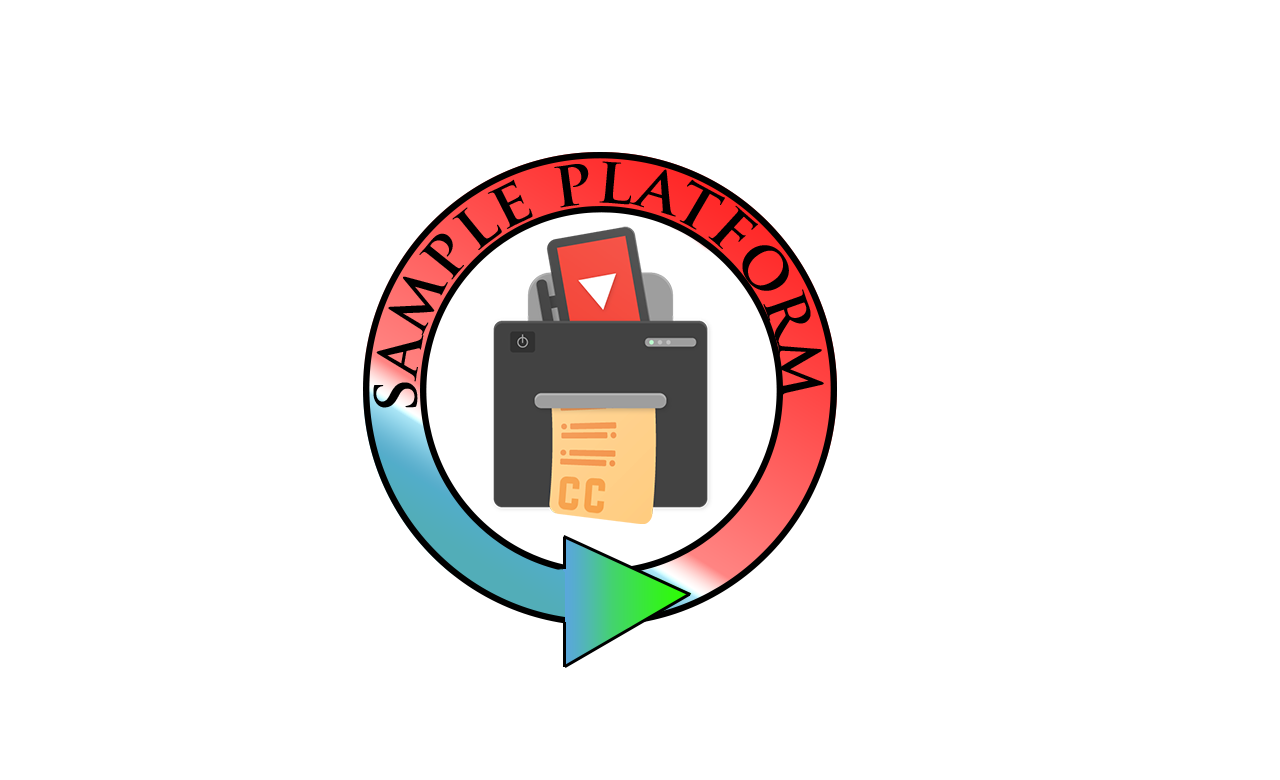
<style>
.page{position:relative;width:1280px;height:780px;background:#ffffff}
.page>*{position:absolute;margin:0}
.t1{font:64.1px "TrajanPro-Bold";color:#000000}
</style>
<div class="page">
<p class="t1" style="left:373px;top:161px;width:451px;height:247px;rotate:8deg">sample platform</p>
</div>
